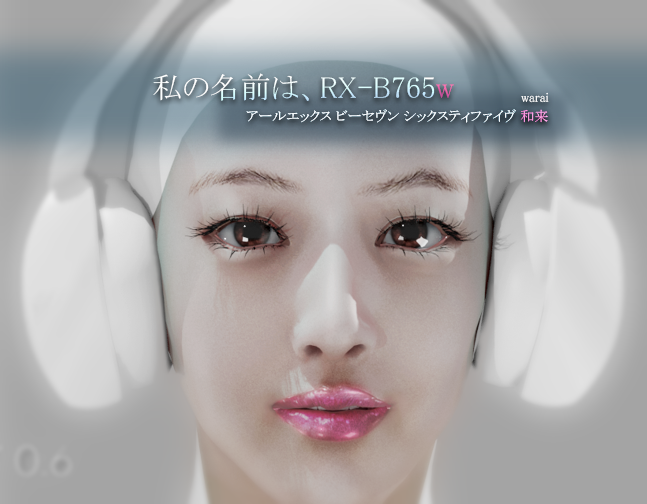
<style>
.page{position:relative;width:647px;height:504px}
.page>*{position:absolute;margin:0}
.t1{font:30px "MS-PMincho"}
.t2{font:13px "MS-PMincho";color:#ffffff}
.t3{font:14px "MS-PMincho";color:#ffffff}
.t4{font:14px "MS-PMincho";color:#ff3f9e}
</style>
<div class="page">
<p class="t1" style="left:153px;top:73px;width:301px;height:28px">私の名前は、RX-B765w</p>
<p class="t2" style="left:521px;top:92px;width:28px;height:11px">warai</p>
<p class="t3" style="left:246px;top:109px;width:302px;height:14px">アールエックス ビーセヴン シックスティファイヴ 和来</p>
<p class="t3" style="left:246px;top:109px;width:302px;height:14px">アールエックス ビーセヴン シックスティファイヴ <span class="t4">和来</span></p>
</div>
